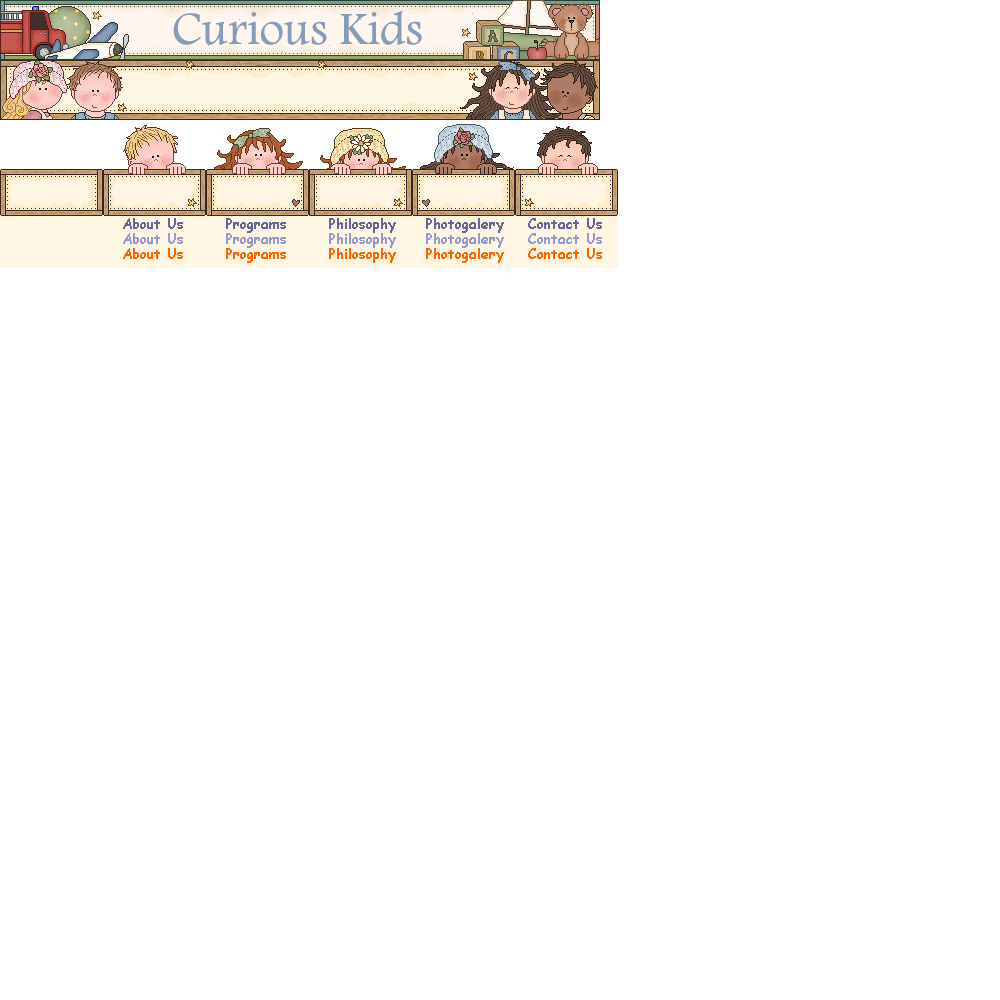
<style>
.page{position:relative;width:1000px;height:1000px;background:#ffffff}
.page>*{position:absolute;margin:0}
.t1{font:14px "ComicSansMS-Bold";color:#666699}
.t2{font:14px "ComicSansMS-Bold";color:#9999cc}
.t3{font:14px "ComicSansMS-Bold";color:#ff6600}
</style>
<div class="page">
<p class="t1" style="left:123px;top:218px;width:479px;height:15px">About Us       Programs       Philosophy     Photogalery    Contact Us</p>
<p class="t2" style="left:123px;top:233px;width:479px;height:15px">About Us       Programs       Philosophy     Photogalery    Contact Us</p>
<p class="t3" style="left:123px;top:248px;width:479px;height:15px">About Us       Programs       Philosophy     Photogalery    Contact Us</p>
</div>
